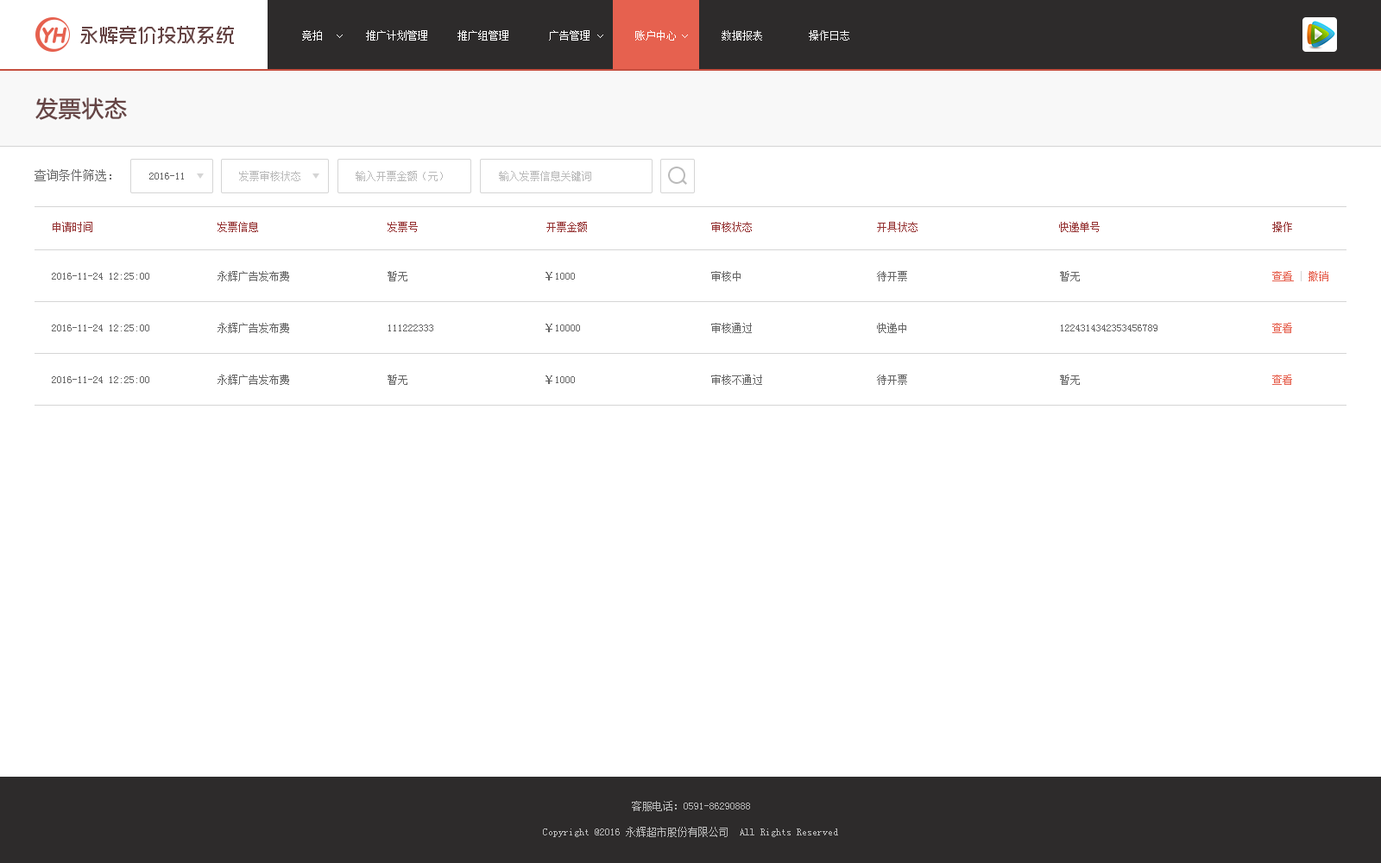
<style>
.page{position:relative;width:1381px;height:863px;background:#ffffff}
.page>*{position:absolute;margin:0}
.t1{font:10.4px "SimSun";color:#ffffff}
.t2{font:10.4px "SimSun";color:#f8f8f8}
.t3{font:22.4px "MicrosoftYaHei";color:#664545;font-weight:bold}
.t4{font:12.1px "SimSun";color:#666666}
.t5{font:10.4px "SimSun";color:#666666}
.t6{font:10.4px "SimSun";color:#bababa}
.t7{font:10.4px "SimSun";color:#953232}
.t8{font:10.4px "SimSun";color:#e6614f;text-decoration:underline}
.t9{font:10.4px "SimSun";color:#d5d5d5}
.t10{font:10.4px "SimSun";color:#e6614f}
</style>
<div class="page">
<p class="t1" style="left:302px;top:30px;width:20px;height:11px">竞拍</p>
<p class="t1" style="left:366px;top:30px;width:61px;height:11px">推广计划管理</p>
<p class="t1" style="left:458px;top:30px;width:50px;height:11px">推广组管理</p>
<p class="t1" style="left:549px;top:30px;width:41px;height:11px">广告管理</p>
<p class="t1" style="left:635px;top:30px;width:41px;height:11px">账户中心</p>
<p class="t1" style="left:635px;top:30px;width:41px;height:11px">账户中心</p>
<p class="t2" style="left:722px;top:30px;width:40px;height:11px">数据报表</p>
<p class="t2" style="left:809px;top:30px;width:40px;height:11px">操作日志</p>
<p class="t3" style="left:35px;top:98px;width:92px;height:22px">发票状态</p>
<p class="t4" style="left:35px;top:169px;width:76px;height:12px">查询条件筛选：</p>
<p class="t5" style="left:149px;top:173px;width:35px;height:7px">2016-11</p>
<p class="t6" style="left:239px;top:171px;width:61px;height:10px">发票审核状态</p>
<p class="t6" style="left:356px;top:171px;width:87px;height:10px">输入开票金额（元）</p>
<p class="t6" style="left:499px;top:171px;width:92px;height:10px">输入发票信息关键词</p>
<p class="t7" style="left:53px;top:222px;width:39px;height:10px">申请时间</p>
<p class="t7" style="left:218px;top:222px;width:40px;height:10px">发票信息</p>
<p class="t7" style="left:388px;top:222px;width:30px;height:10px">发票号</p>
<p class="t7" style="left:546px;top:222px;width:41px;height:10px">开票金额</p>
<p class="t7" style="left:711px;top:222px;width:41px;height:10px">审核状态</p>
<p class="t7" style="left:877px;top:222px;width:41px;height:10px">开具状态</p>
<p class="t7" style="left:1059px;top:222px;width:41px;height:10px">快递单号</p>
<p class="t7" style="left:1272px;top:222px;width:20px;height:10px">操作</p>
<p class="t5" style="left:52px;top:273px;width:97px;height:7px">2016-11-24 12:25:00</p>
<p class="t5" style="left:218px;top:271px;width:71px;height:10px">永辉广告发布费</p>
<p class="t5" style="left:388px;top:271px;width:19px;height:10px">暂无</p>
<p class="t5" style="left:546px;top:272px;width:29px;height:9px">￥1000</p>
<p class="t5" style="left:711px;top:271px;width:30px;height:10px">审核中</p>
<p class="t5" style="left:877px;top:271px;width:30px;height:10px">待开票</p>
<p class="t5" style="left:1060px;top:271px;width:20px;height:10px">暂无</p>
<p class="t8" style="left:1272px;top:271px;width:57px;height:10px">查看 <span class="t9">| </span><span class="t10">撤销</span></p>
<p class="t5" style="left:52px;top:325px;width:97px;height:7px">2016-11-24 12:25:00</p>
<p class="t5" style="left:218px;top:323px;width:71px;height:10px">永辉广告发布费</p>
<p class="t5" style="left:388px;top:325px;width:45px;height:7px">111222333</p>
<p class="t5" style="left:546px;top:324px;width:34px;height:8px">￥10000</p>
<p class="t5" style="left:711px;top:323px;width:41px;height:10px">审核通过</p>
<p class="t5" style="left:877px;top:323px;width:29px;height:10px">快递中</p>
<p class="t5" style="left:1061px;top:325px;width:97px;height:7px">1224314342353456789</p>
<p class="t10" style="left:1272px;top:323px;width:20px;height:10px">查看</p>
<p class="t5" style="left:52px;top:376px;width:97px;height:7px">2016-11-24 12:25:00</p>
<p class="t5" style="left:218px;top:375px;width:71px;height:10px">永辉广告发布费</p>
<p class="t5" style="left:388px;top:375px;width:19px;height:10px">暂无</p>
<p class="t5" style="left:546px;top:376px;width:29px;height:8px">￥1000</p>
<p class="t5" style="left:711px;top:375px;width:51px;height:10px">审核不通过</p>
<p class="t5" style="left:877px;top:375px;width:30px;height:10px">待开票</p>
<p class="t5" style="left:1060px;top:375px;width:20px;height:10px">暂无</p>
<p class="t10" style="left:1272px;top:375px;width:20px;height:10px">查看</p>
<p class="t6" style="left:632px;top:801px;width:118px;height:10px">客服电话：0591-86290888</p>
<p class="t6" style="left:543px;top:827px;width:295px;height:10px">Copyright @2016 永辉超市股份有限公司  All Rights Reserved</p>
</div>
